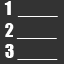
<style>
.page{position:relative;width:64px;height:64px;background:#333333}
.page>*{position:absolute;margin:0}
.t1{font:18px "Impact";color:#ffffff}
</style>
<div class="page">
<p class="t1" style="left:4px;top:1px;width:54px;height:59px">1  ____<br>2 ____<br>3 ____</p>
</div>
